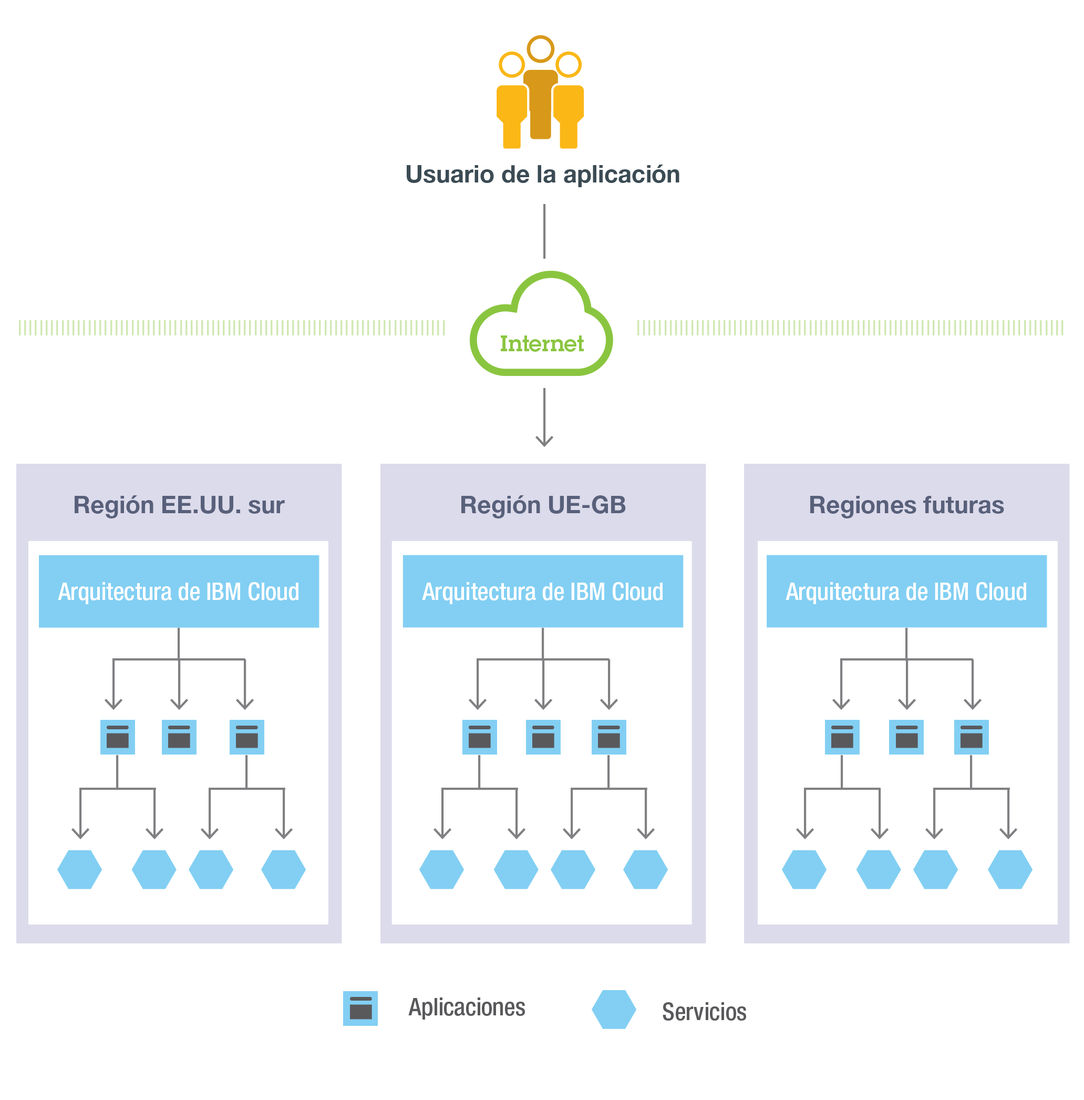
<style>
.page{position:relative;width:1084px;height:1100px;background:#ffffff}
.page>*{position:absolute;margin:0}
.t1{font:24.1px "HelveticaNeue-Bold";color:#3b4b54}
.t2{font:21.9px "LubalinDemiforIBM";color:#8ac540}
.t3{font:24.1px "HelveticaNeue-Bold";color:#58607a}
.t4{font:24.1px "HelveticaNeue-MediumCond";color:#fffefe}
.t5{font:24.1px "HelveticaNeue-MediumCond";color:#59595c}
</style>
<div class="page">
<p class="t1" style="left:407px;top:165px;width:273px;height:22px">Usuario de la aplicación</p>
<p class="t2" style="left:501px;top:335px;width:83px;height:17px">Internet</p>
<p class="t3" style="left:75px;top:495px;width:210px;height:23px">Región EE.UU. sur</p>
<p class="t3" style="left:462px;top:495px;width:164px;height:23px">Región UE-GB</p>
<p class="t3" style="left:811px;top:496px;width:193px;height:22px">Regiones futuras</p>
<p class="t4" style="left:58px;top:582px;width:241px;height:22px">Arquitectura de IBM Cloud</p>
<p class="t4" style="left:422px;top:582px;width:241px;height:22px">Arquitectura de IBM Cloud</p>
<p class="t4" style="left:786px;top:582px;width:241px;height:22px">Arquitectura de IBM Cloud</p>
<p class="t5" style="left:408px;top:997px;width:117px;height:22px">Aplicaciones</p>
<p class="t5" style="left:663px;top:1002px;width:83px;height:18px">Servicios</p>
</div>
